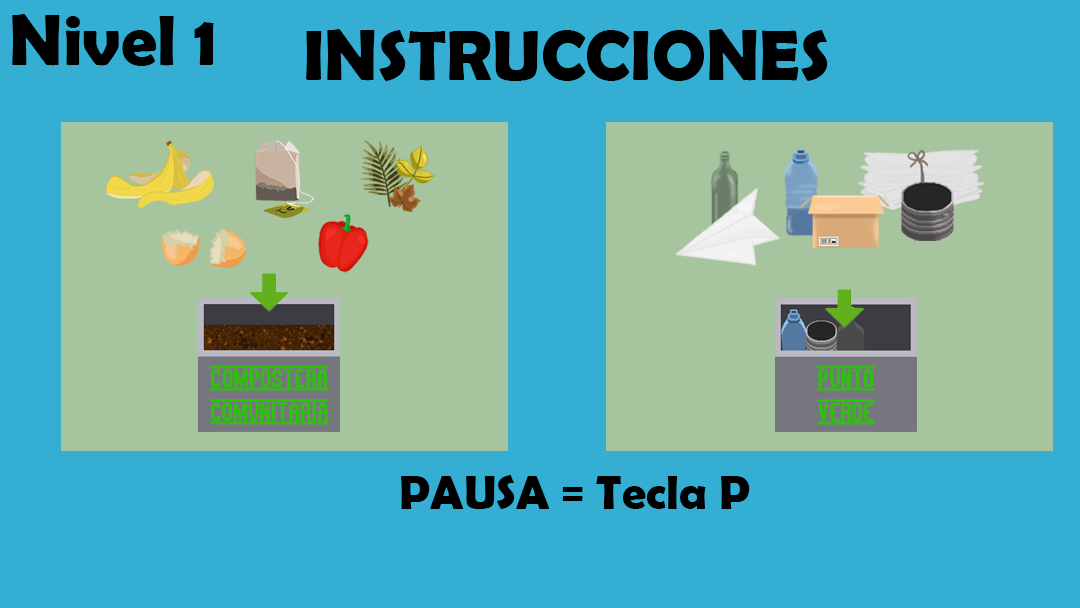
<style>
.page{position:relative;width:1080px;height:608px;background:#34afd3}
.page>*{position:absolute;margin:0}
.t1{font:72px "BerlinSansFBDemi-Bold";color:#000000}
.t2{font:48px "BerlinSansFBDemi-Bold";color:#000000}
</style>
<div class="page">
<p class="t1" style="left:12px;top:14px;width:202px;height:52px">Nivel 1</p>
<p class="t1" style="left:306px;top:29px;width:522px;height:52px">INSTRUCCIONES</p>
<p class="t2" style="left:401px;top:475px;width:349px;height:34px">PAUSA = Tecla P</p>
</div>
